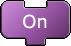
<style>
.page{position:relative;width:71px;height:46px}
.page>*{position:absolute;margin:0}
.t1{font:18px "Verdana";color:#ffffff}
</style>
<div class="page">
<p class="t1" style="left:23px;top:14px;width:24px;height:15px">On</p>
</div>
